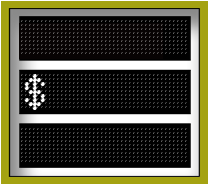
<style>
.page{position:relative;width:208px;height:184px;background:#000000}
.page>*{position:absolute;margin:0}
.t1{font:36px "LED-BOARD-REVERSED";color:#ffffff}
</style>
<div class="page">
<p class="t1" style="left:21px;top:74px;width:166px;height:36px">$</p>
</div>
